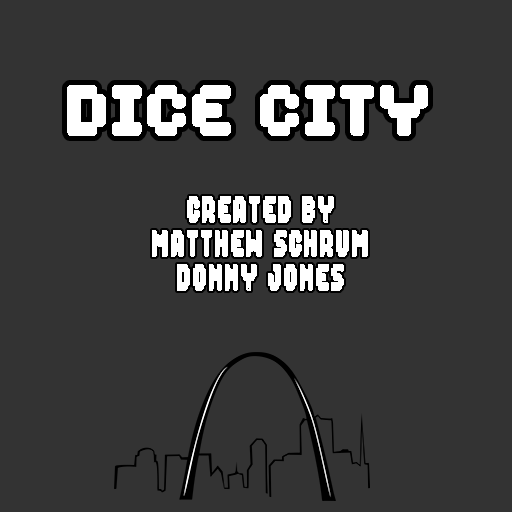
<style>
.page{position:relative;width:512px;height:512px;background:#333333}
.page>*{position:absolute;margin:0}
.t1{font:49.7px "Spaceboy";color:#ffffff;font-weight:bold;scale:0.93 1}
.t2{font:26.2px/34px "Spaceboy";color:#ffffff;font-weight:bold;scale:0.59 1}
</style>
<div class="page">
<p class="t1" style="left:67px;top:85px;width:361px;height:51px">Dice City</p>
<p class="t2" style="left:152px;top:196px;width:216px;height:95px;text-align:center">Created by<br>Matthew Schrum<br>Donny Jones</p>
</div>
